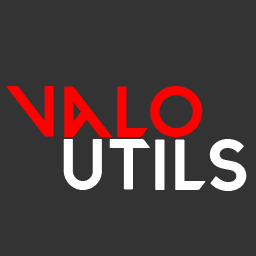
<style>
.page{position:relative;width:256px;height:256px;background:#333333}
.page>*{position:absolute;margin:0}
.t1{font:72px "VALORANT-Regular";color:#ff0000}
.t2{font:72px "VALORANT-Regular";color:#ffffff}
</style>
<div class="page">
<p class="t1" style="left:6px;top:86px;width:197px;height:51px">Valo</p>
<p class="t2" style="left:63px;top:139px;width:184px;height:52px">Utils</p>
</div>
